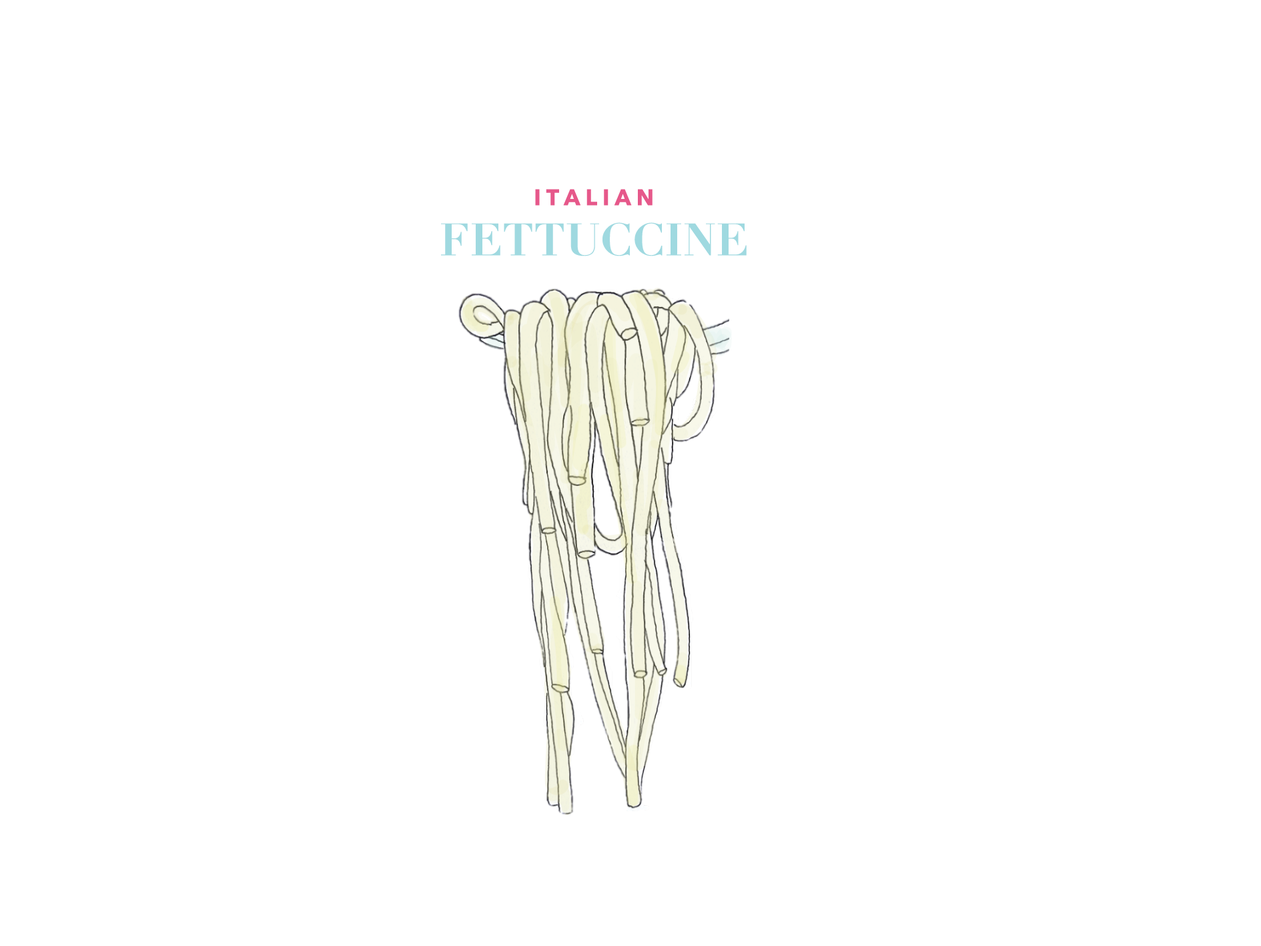
<style>
.page{position:relative;width:1261px;height:946px;background:#ffffff}
.page>*{position:absolute;margin:0}
.t1{font:22.2px/25px "AvenirNext-Bold";letter-spacing:0.004em;color:#e6588a}
.t2{font:22.2px/25px "AvenirNext-Regular";letter-spacing:0.004em;color:#000000}
.t3{font:44.5px/25px "Didot-Bold";letter-spacing:0.004em;color:#9fd9e0}
</style>
<div class="page">
<p class="t1" style="left:441px;top:189px;width:306px;height:67px;text-align:center">I T A L I A N<br><span class="t2"><br></span><span class="t3">FETTUCCINE</span></p>
</div>
